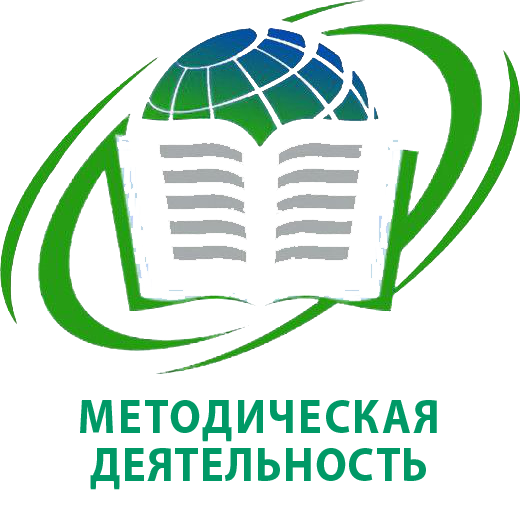
<style>
.page{position:relative;width:520px;height:520px;background:#ffffff}
.page>*{position:absolute;margin:0}
.t1{font:48.6px/48.6px "MyriadPro-Bold";letter-spacing:0.05em;color:#009966;scale:0.91 1}
.t2{font:48.6px/48.6px "MyriadPro-Bold";letter-spacing:0.025em;color:#009966;scale:0.91 1}
</style>
<div class="page">
<p class="t1" style="left:80px;top:400px;width:357px;height:90px;text-align:center">МЕТОДИЧЕСКАЯ<br><span class="t2">ДЕЯТЕЛЬНОСТЬ</span></p>
</div>
